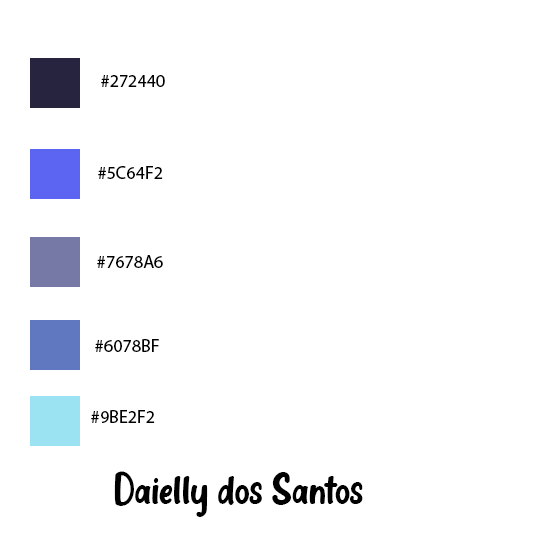
<style>
.page{position:relative;width:550px;height:550px;background:#ffffff}
.page>*{position:absolute;margin:0}
.t1{font:18px "MyriadPro-Regular";color:#000000}
.t2{font:30px "DelightCandles";color:#000000}
</style>
<div class="page">
<p class="t1" style="left:101px;top:75px;width:64px;height:12px">#272440</p>
<p class="t1" style="left:98px;top:166px;width:65px;height:13px">#5C64F2</p>
<p class="t1" style="left:97px;top:255px;width:66px;height:13px">#7678A6</p>
<p class="t1" style="left:95px;top:339px;width:64px;height:13px">#6078BF</p>
<p class="t1" style="left:91px;top:410px;width:64px;height:13px">#9BE2F2</p>
<p class="t2" style="left:114px;top:471px;width:249px;height:46px">Daielly dos Santos</p>
</div>
